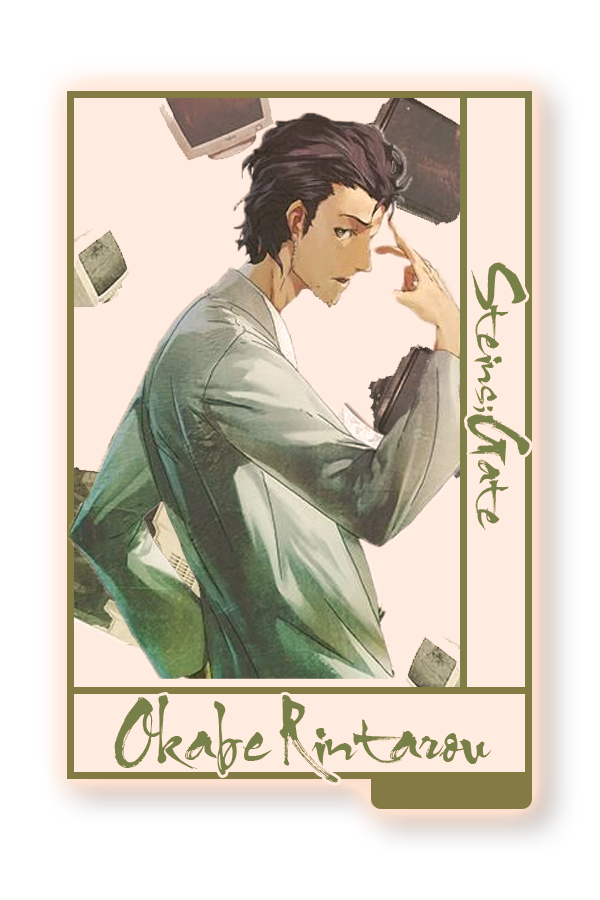
<style>
.page{position:relative;width:600px;height:900px;background:#ffece0}
.page>*{position:absolute;margin:0}
.t1{font:48.8px "HLThuphap1BKupgrade";color:#708157}
.t2{font:65.2px "HLThuphap1BKupgrade";color:#708157}
</style>
<div class="page">
<p class="t1" style="left:466px;top:262px;width:64px;height:268px;rotate:90deg">Steins;;Gate</p>
<p class="t2" style="left:114px;top:695px;width:378px;height:88px">Okabe Rintarou</p>
</div>
